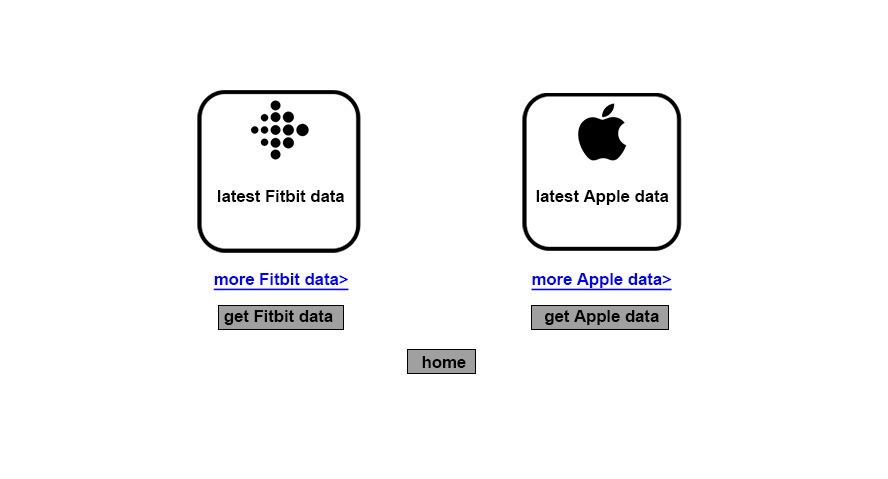
<style>
.page{position:relative;width:888px;height:479px;background:#ffffff}
.page>*{position:absolute;margin:0}
.t1{font:16.7px "Arial-BoldMT";color:#000000}
.t2{font:16.7px "Arial-BoldMT";color:#0000ff;text-decoration:underline}
</style>
<div class="page">
<p class="t1" style="left:218px;top:190px;width:127px;height:12px">latest Fitbit data</p>
<p class="t1" style="left:536px;top:190px;width:133px;height:15px">latest Apple data</p>
<p class="t2" style="left:213px;top:273px;width:136px;height:18px">more Fitbit data&gt;</p>
<p class="t2" style="left:531px;top:273px;width:141px;height:18px">more Apple data&gt;</p>
<p class="t1" style="left:224px;top:310px;width:109px;height:15px">get Fitbit data</p>
<p class="t1" style="left:545px;top:310px;width:114px;height:15px">get Apple data</p>
<p class="t1" style="left:422px;top:356px;width:44px;height:12px">home</p>
</div>
